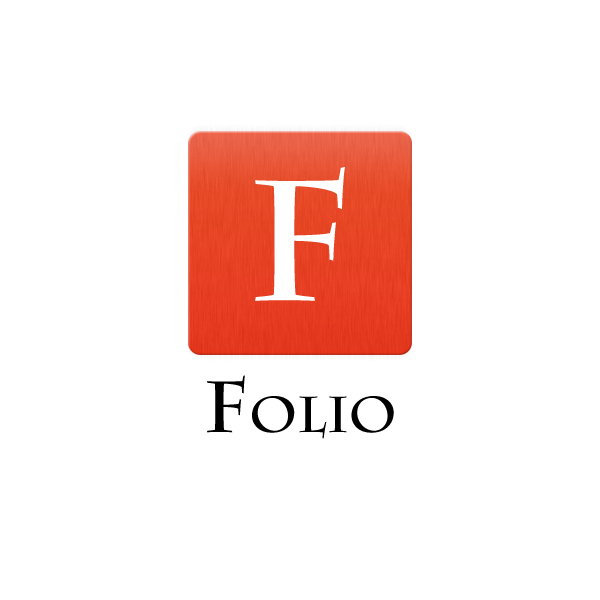
<style>
.page{position:relative;width:600px;height:600px;background:#ffffff}
.page>*{position:absolute;margin:0}
.t1{font:72px "CharlemagneStd-Bold";color:#000000;font-variant:small-caps}
</style>
<div class="page">
<p class="t1" style="left:207px;top:375px;width:187px;height:64px">Folio</p>
</div>
